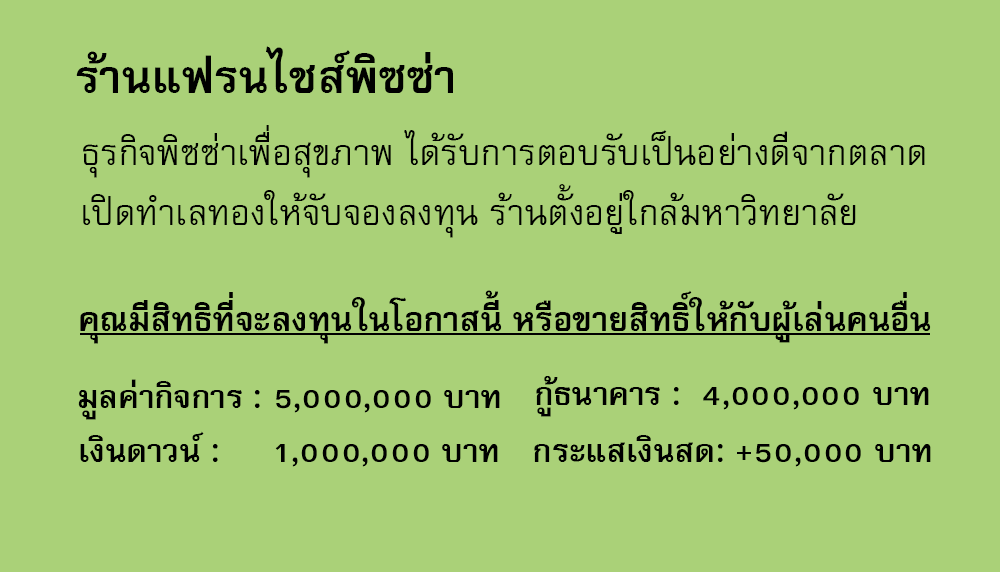
<style>
.page{position:relative;width:1000px;height:572px;background:#aad178}
.page>*{position:absolute;margin:0}
.t1{font:64px "FreesiaUPCBold";color:#000000}
.t2{font:50px/60px "FreesiaUPC";color:#000000}
.t3{font:47px "FreesiaUPCBold";color:#000000}
.t4{font:45px "FreesiaUPCBold";color:#000000}
</style>
<div class="page">
<p class="t1" style="left:76px;top:46px;width:377px;height:47px">ร้านแฟรนไชส์พิซซ่า</p>
<p class="t2" style="left:83px;top:125px;width:842px;height:113px">ธุรกิจพิซซ่าเพื่อสุขภาพ ได้รับการตอบรับเป็นอย่างดีจากตลาด<br>เปิดทำเลทองให้จับจองลงทุน ร้านตั้งอยู่ใกล้มหาวิทยาลัย</p>
<p class="t3" style="left:80px;top:290px;width:851px;height:54px">คุณมีสิทธิที่จะลงทุนในโอกาสนี้ หรือขายสิทธิ์ให้กับผู้เล่นคนอื่น</p>
<p class="t4" style="left:536px;top:376px;width:393px;height:41px">กู้ธนาคาร :  4,000,000 บาท</p>
<p class="t4" style="left:78px;top:379px;width:422px;height:41px">มูลค่ากิจการ : 5,000,000 บาท</p>
<p class="t4" style="left:80px;top:431px;width:418px;height:36px">เงินดาวน์ :     1,000,000 บาท</p>
<p class="t4" style="left:534px;top:435px;width:397px;height:32px">กระแสเงินสด: +50,000 บาท</p>
</div>
